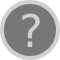
<style>
.page{position:relative;width:60px;height:60px;background:#777777}
.page>*{position:absolute;margin:0}
.t1{font:45px "DejaVuSans";color:#d0d0d0}
</style>
<div class="page">
<p class="t1" style="left:22px;top:13px;width:18px;height:34px">?</p>
</div>
